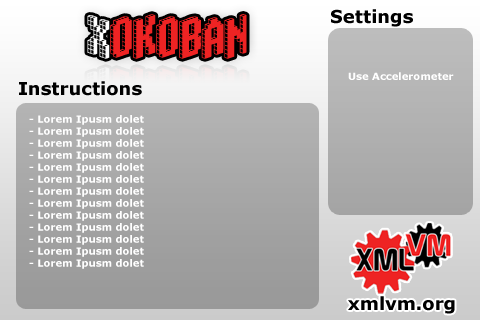
<style>
.page{position:relative;width:480px;height:320px}
.page>*{position:absolute;margin:0}
.t1{font:46.1px "Blox-(BRK";color:#ee2323}
.t2{font:46.1px "Blox-(BRK";color:#ffffff}
.t3{font:18px "Verdana-Bold";color:#000000}
.t4{font:10px "Verdana-Bold";color:#ffffff}
</style>
<div class="page">
<p class="t1" style="left:87px;top:14px;width:160px;height:45px"><span class="t2">X</span>okoban</p>
<p class="t3" style="left:331px;top:9px;width:82px;height:18px">Settings</p>
<p class="t4" style="left:348px;top:72px;width:106px;height:8px">Use Accelerometer</p>
<p class="t3" style="left:19px;top:81px;width:123px;height:15px">Instructions</p>
<p class="t4" style="left:29px;top:115px;width:115px;height:154px">- Lorem Ipusm dolet<br>- Lorem Ipusm dolet<br>- Lorem Ipusm dolet<br>- Lorem Ipusm dolet<br>- Lorem Ipusm dolet<br>- Lorem Ipusm dolet<br>- Lorem Ipusm dolet<br>- Lorem Ipusm dolet<br>- Lorem Ipusm dolet<br>- Lorem Ipusm dolet<br>- Lorem Ipusm dolet<br>- Lorem Ipusm dolet<br>- Lorem Ipusm dolet</p>
<p class="t3" style="left:348px;top:296px;width:107px;height:18px">xmlvm.org</p>
</div>
